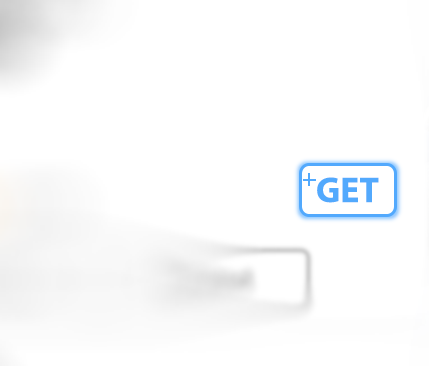
<style>
.page{position:relative;width:429px;height:366px;background:#ffffff}
.page>*{position:absolute;margin:0}
.t1{font:35.9px "MyriadPro-Bold";color:#52a9fd}
</style>
<div class="page">
<p class="t1" style="left:317px;top:177px;width:62px;height:26px">GET</p>
</div>
